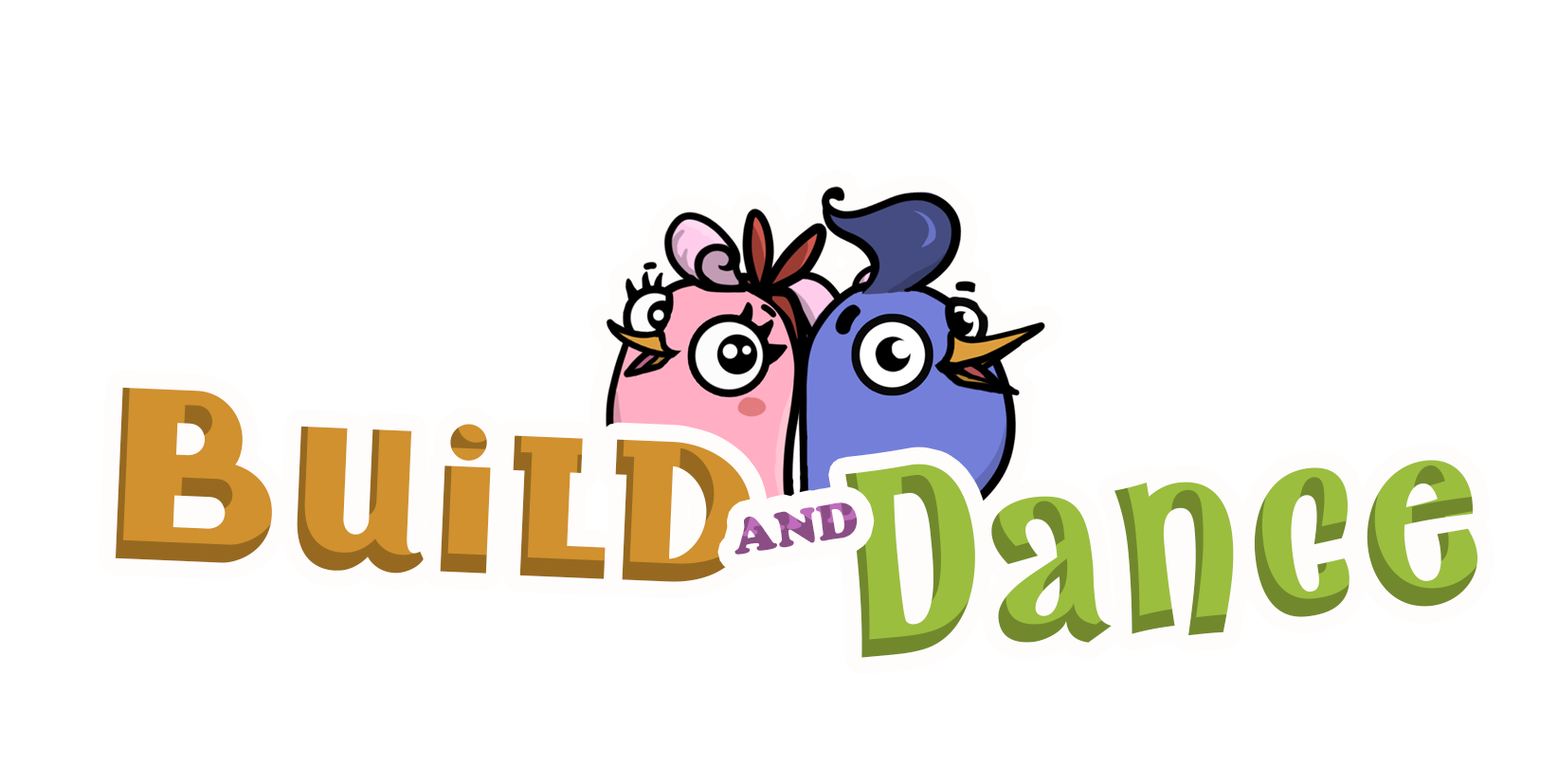
<style>
.page{position:relative;width:1558px;height:766px;background:#ffffff}
.page>*{position:absolute;margin:0}
.t1{font:193.3px "BadTyp-Regular";color:#d0912e}
.t2{font:236.9px "BadTyp-Regular";color:#d0912e}
.t3{font:258.6px "Catseye-Bold";color:#9bbe3e}
.t4{font:51.5px "CooperBlack";color:#8a4e84}
</style>
<div class="page">
<p class="t1" style="left:115px;top:387px;width:636px;height:195px;rotate:2deg"><span class="t2">B</span>uild</p>
<p class="t3" style="left:845px;top:460px;width:633px;height:198px;rotate:-5deg">Dance</p>
<p class="t4" style="left:734px;top:502px;width:123px;height:52px;rotate:-9deg">AND</p>
</div>
